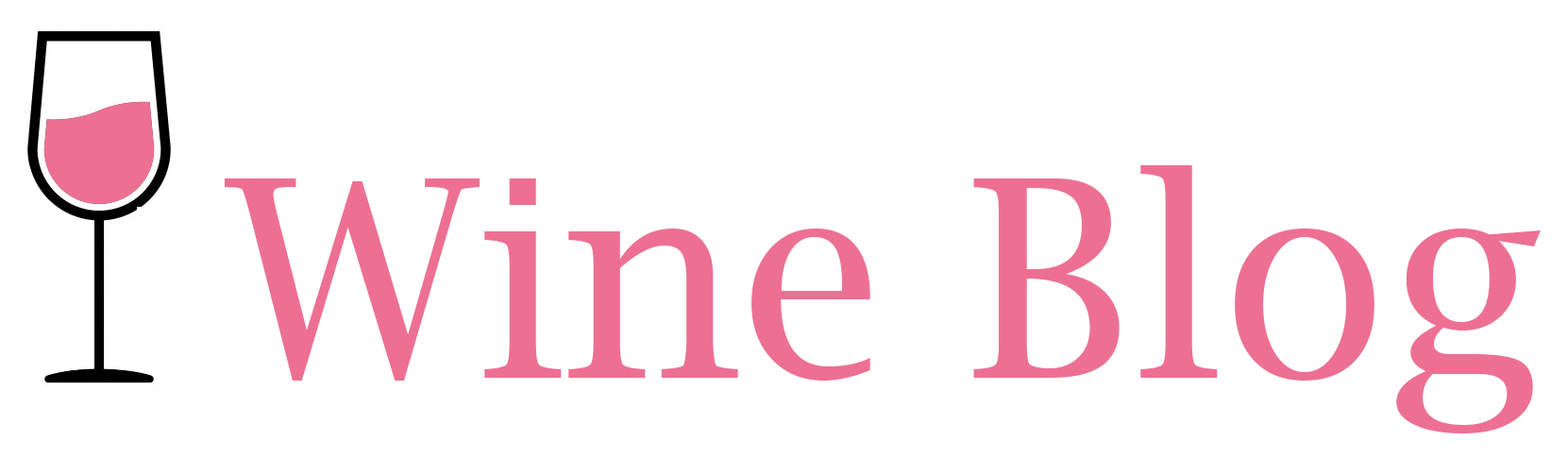
<style>
.page{position:relative;width:1568px;height:458px;background:#ffffff}
.page>*{position:absolute;margin:0}
.t1{font:275.3px "LucidaBright";color:#ed7093}
</style>
<div class="page">
<p class="t1" style="left:225px;top:165px;width:1316px;height:268px">Wine Blog</p>
</div>
